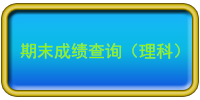
<style>
.page{position:relative;width:200px;height:100px}
.page>*{position:absolute;margin:0}
.t1{font:17px "SimHei";color:#95f40d}
</style>
<div class="page">
<p class="t1" style="left:20px;top:42px;width:160px;height:17px">期末成绩查询（理科）</p>
</div>
